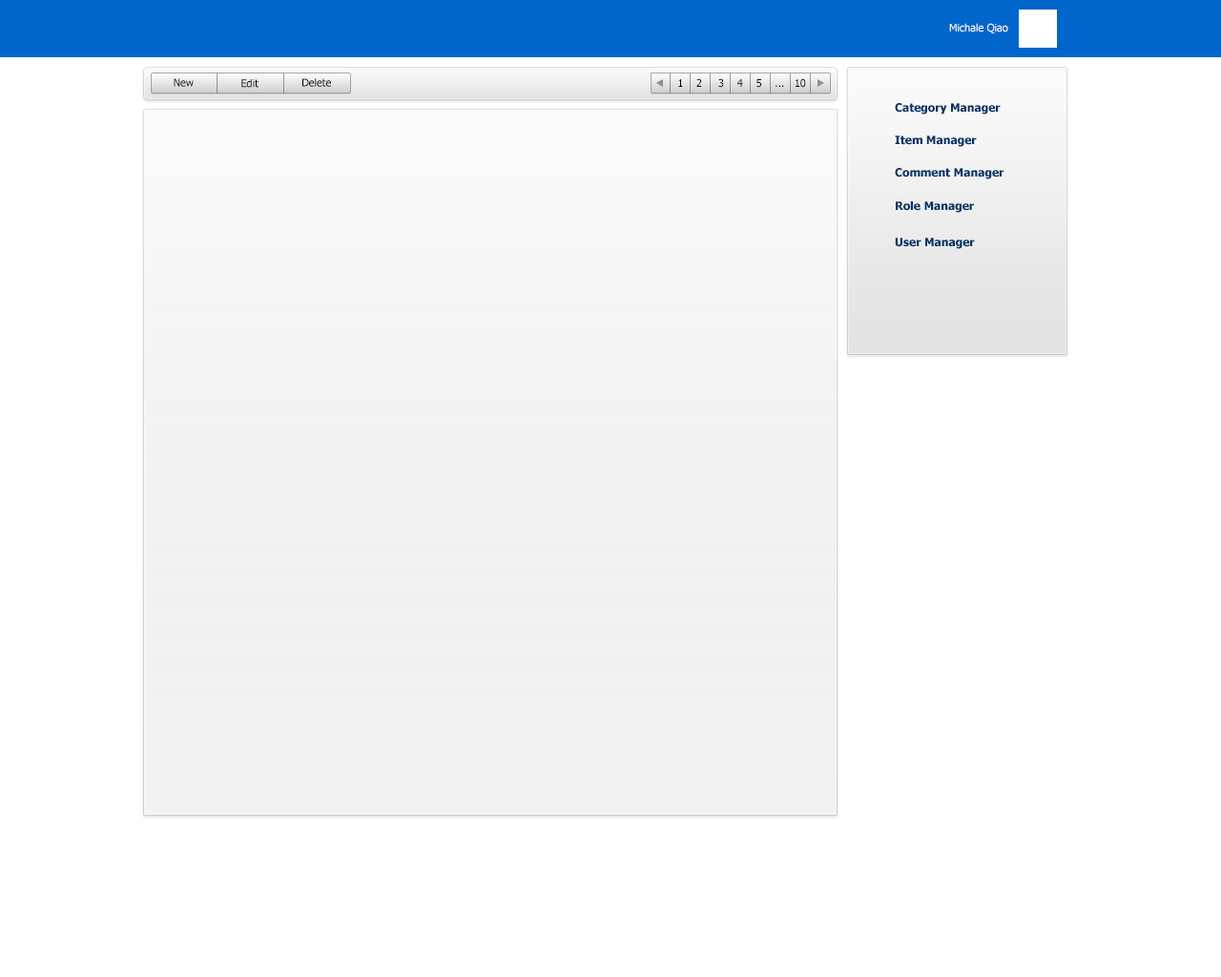
<style>
.page{position:relative;width:1221px;height:977px;background:#ffffff}
.page>*{position:absolute;margin:0}
.t1{font:10.5px "Tahoma";color:#ffffff}
.t2{font:10.5px "Tahoma";color:#000000}
.t3{font:11.4px "Tahoma-Bold";color:#003366}
</style>
<div class="page">
<p class="t1" style="left:949px;top:23px;width:59px;height:10px">Michale Qiao</p>
<p class="t2" style="left:174px;top:78px;width:20px;height:9px">New</p>
<p class="t2" style="left:241px;top:79px;width:17px;height:9px">Edit</p>
<p class="t2" style="left:302px;top:78px;width:29px;height:9px">Delete</p>
<p class="t2" style="left:678px;top:78px;width:128px;height:10px">1    2     3    4    5    ...   10</p>
<p class="t3" style="left:895px;top:103px;width:106px;height:11px">Category Manager</p>
<p class="t3" style="left:895px;top:135px;width:82px;height:12px">Item Manager</p>
<p class="t3" style="left:895px;top:168px;width:109px;height:11px">Comment Manager</p>
<p class="t3" style="left:896px;top:201px;width:78px;height:12px">Role Manager</p>
<p class="t3" style="left:895px;top:237px;width:80px;height:12px">User Manager</p>
</div>
